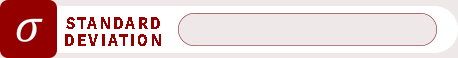
<style>
.page{position:relative;width:458px;height:58px;background:#efe8e8}
.page>*{position:absolute;margin:0}
.t1{font:17.7px/16.7px "WorkSansRoman-Bold";letter-spacing:0.15em;color:#940000;scale:0.82 1}
</style>
<div class="page">
<p class="t1" style="left:65px;top:17px;width:96px;height:29px;text-align:center">STANDARD<br>DEVIATION</p>
</div>
